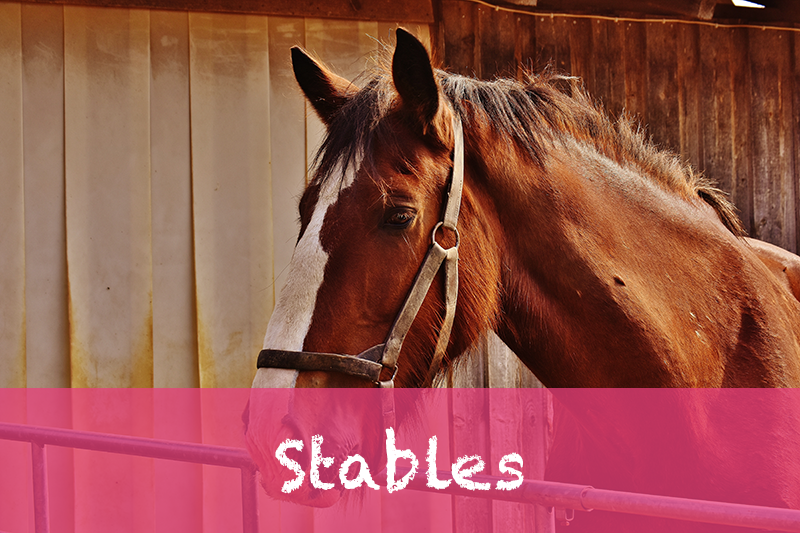
<style>
.page{position:relative;width:800px;height:533px}
.page>*{position:absolute;margin:0}
.t1{font:66.5px "Chalkduster";color:#ffffff}
</style>
<div class="page">
<p class="t1" style="left:275px;top:426px;width:249px;height:68px">Stables</p>
</div>
